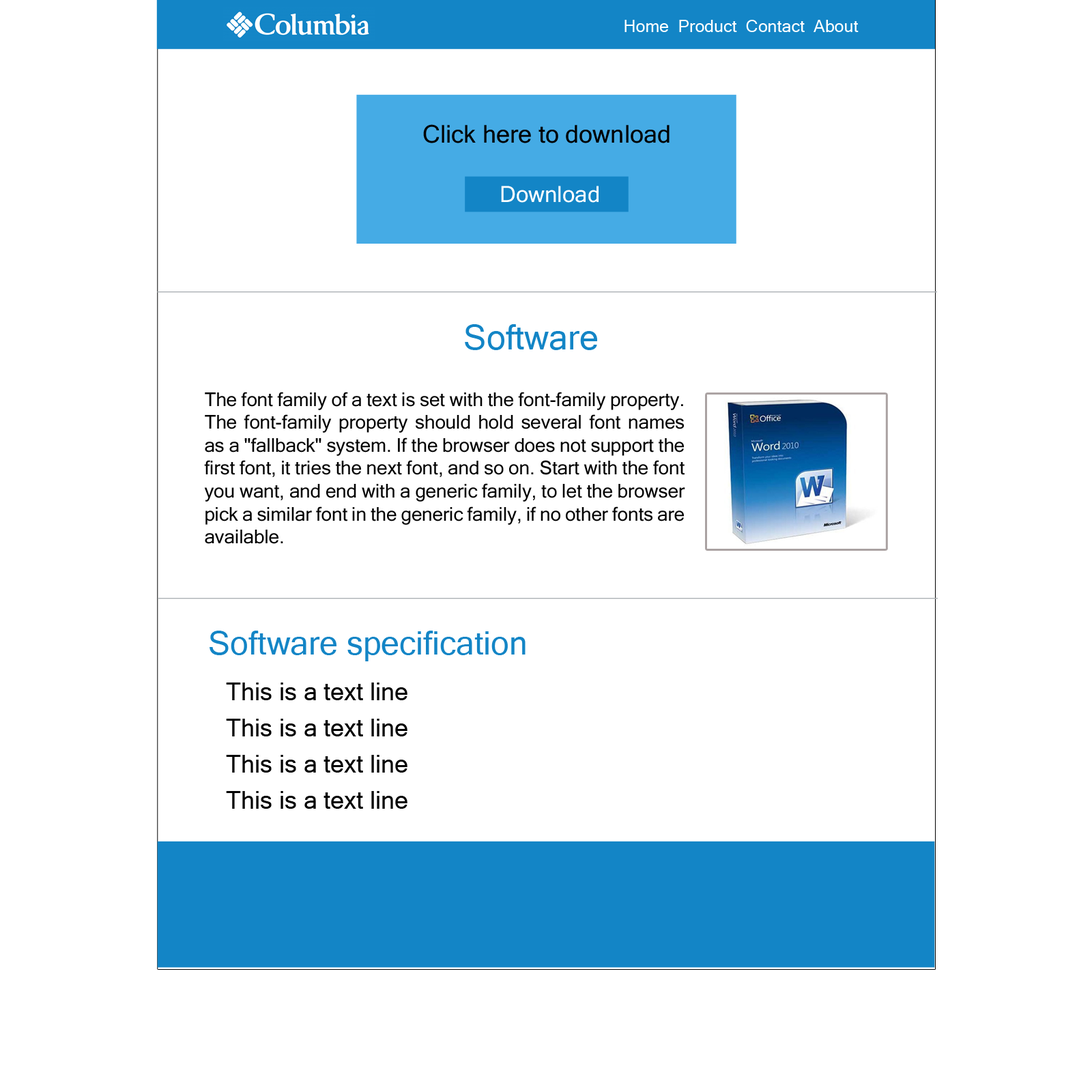
<style>
.page{position:relative;width:1092px;height:1092px;background:#ffffff}
.page>*{position:absolute;margin:0}
.t1{font:17.1px "MicrosoftSansSerif";color:#ffffff}
.t2{font:24.6px "MicrosoftSansSerif";color:#000000}
.t3{font:22.5px "MicrosoftSansSerif";color:#ffffff}
.t4{font:24.6px "MicrosoftSansSerif";color:#ffffff}
.t5{font:34.1px "MicrosoftSansSerif";color:#1385c6}
.t6{font:19.1px "MicrosoftSansSerif";color:#010101}
.t7{font:32.8px "MicrosoftSansSerif";color:#1385c6}
.t8{font:24.6px "MicrosoftSansSerif";color:#010101}
</style>
<div class="page">
<p class="t1" style="left:624px;top:20px;width:235px;height:12px">Home  Product  Contact  About</p>
<p class="t2" style="left:423px;top:124px;width:247px;height:19px">Click here to download</p>
<p class="t3" style="left:501px;top:186px;width:98px;height:17px"><span class="t4"> </span>Download</p>
<p class="t5" style="left:465px;top:324px;width:132px;height:26px">Software</p>
<p class="t6" style="left:204px;top:392px;width:481px;height:152px;text-align:justify">The font family of a text is set with the font-family property. The font-family property should hold several font names as a "fallback" system. If the browser does not support the first font, it tries the next font, and so on. Start with the font you want, and end with a generic family, to let the browser pick a similar font in the generic family, if no other fonts are available.</p>
<p class="t7" style="left:210px;top:631px;width:316px;height:30px">Software specification</p>
<p class="t8" style="left:226px;top:682px;width:181px;height:18px">This is a text line</p>
<p class="t8" style="left:226px;top:719px;width:181px;height:17px">This is a text line</p>
<p class="t8" style="left:226px;top:755px;width:181px;height:18px">This is a text line</p>
<p class="t8" style="left:226px;top:791px;width:181px;height:18px">This is a text line</p>
</div>
